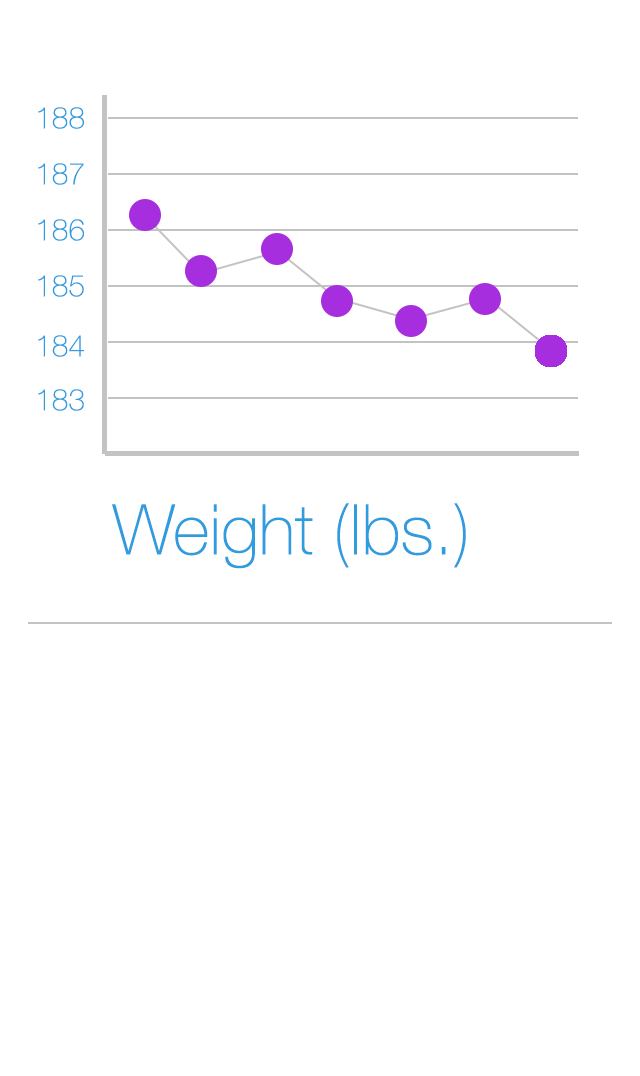
<style>
.page{position:relative;width:640px;height:1076px;background:#ffffff}
.page>*{position:absolute;margin:0}
.t1{font:30px "HelveticaNeue-Thin";color:#2e9cdf}
.t2{font:70px "HelveticaNeue-Thin";color:#2e9cdf}
</style>
<div class="page">
<p class="t1" style="left:38px;top:107px;width:46px;height:22px">188</p>
<p class="t1" style="left:38px;top:163px;width:46px;height:22px">187</p>
<p class="t1" style="left:38px;top:219px;width:46px;height:22px">186</p>
<p class="t1" style="left:38px;top:275px;width:46px;height:22px">185</p>
<p class="t1" style="left:38px;top:335px;width:46px;height:22px">184</p>
<p class="t1" style="left:38px;top:389px;width:46px;height:22px">183</p>
<p class="t2" style="left:112px;top:503px;width:354px;height:66px">Weight (lbs.)</p>
</div>
